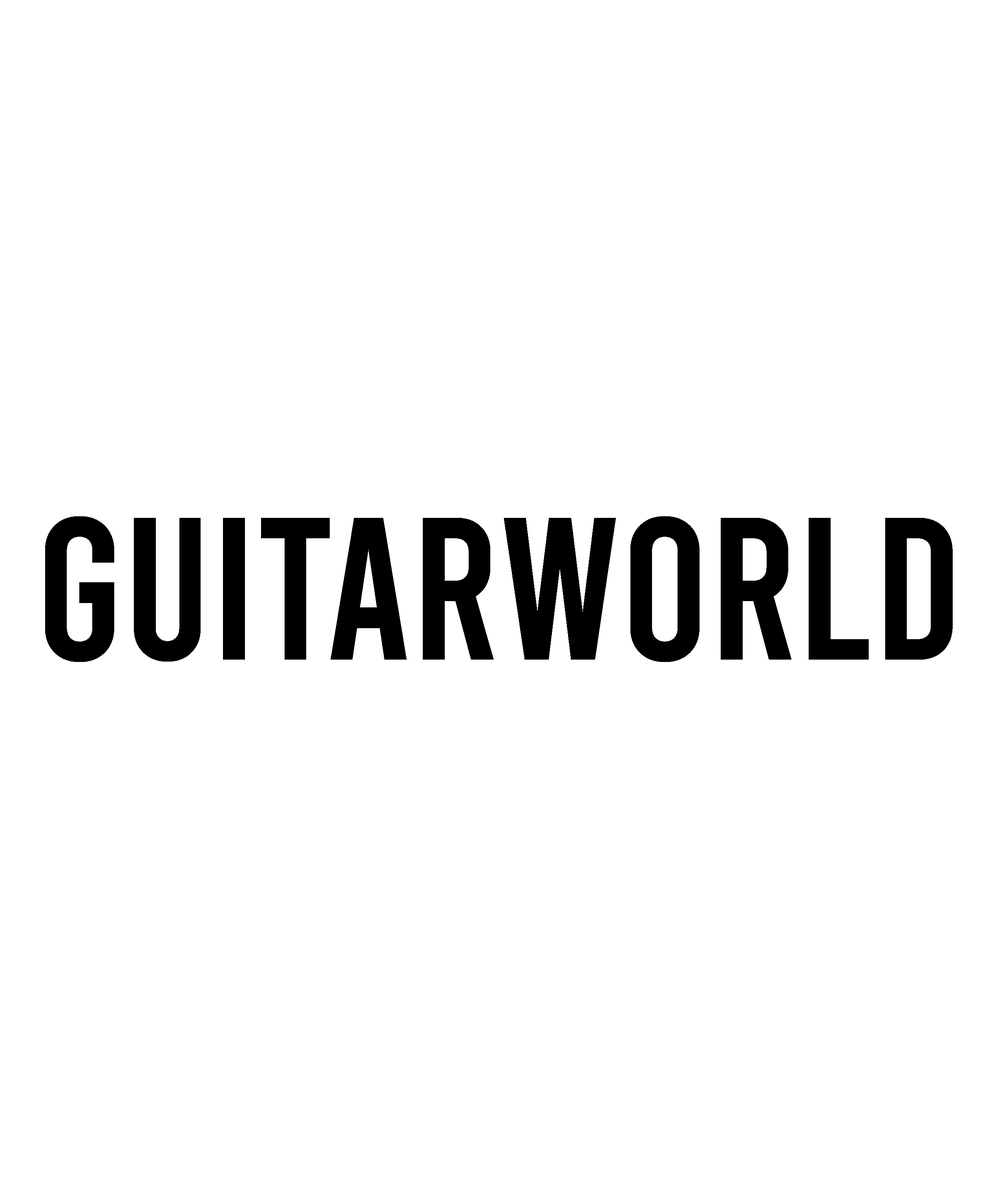
<style>
.page{position:relative;width:1001px;height:1192px;background:#ffffff}
.page>*{position:absolute;margin:0}
.t1{font:202.1px "Bebas-Regular";color:#000000}
</style>
<div class="page">
<p class="t1" style="left:45px;top:516px;width:908px;height:146px">guitarworld</p>
</div>
